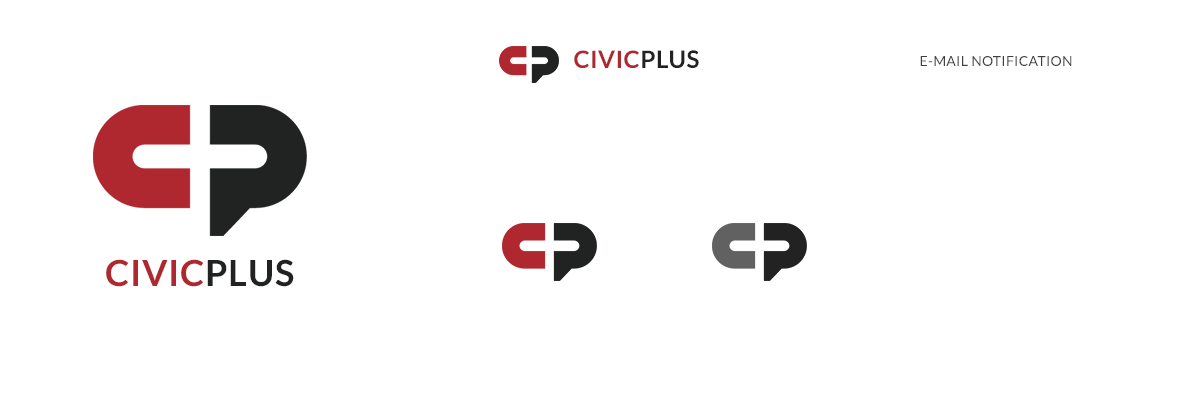
<style>
.page{position:relative;width:1200px;height:400px;background:#ffffff}
.page>*{position:absolute;margin:0}
.t1{font:24px "Lato-Bold";letter-spacing:0.02em;color:#af282f;text-transform:uppercase}
.t2{font:24px "Lato-Bold";letter-spacing:0.02em;color:#212222;text-transform:uppercase}
.t3{font:14px "Lato-Regular";letter-spacing:0.02em;color:#404040;text-transform:uppercase}
.t4{font:36px "Lato-Bold";letter-spacing:0.02em;color:#af282f;text-transform:uppercase}
.t5{font:36px "Lato-Bold";letter-spacing:0.02em;color:#212222;text-transform:uppercase}
</style>
<div class="page">
<p class="t1" style="left:574px;top:50px;width:125px;height:18px">Civic<span class="t2">Plus</span></p>
<p class="t3" style="left:920px;top:56px;width:152px;height:10px">E-mAIL NOTIFICATION</p>
<p class="t4" style="left:106px;top:259px;width:188px;height:28px">Civic<span class="t5">Plus</span></p>
</div>
